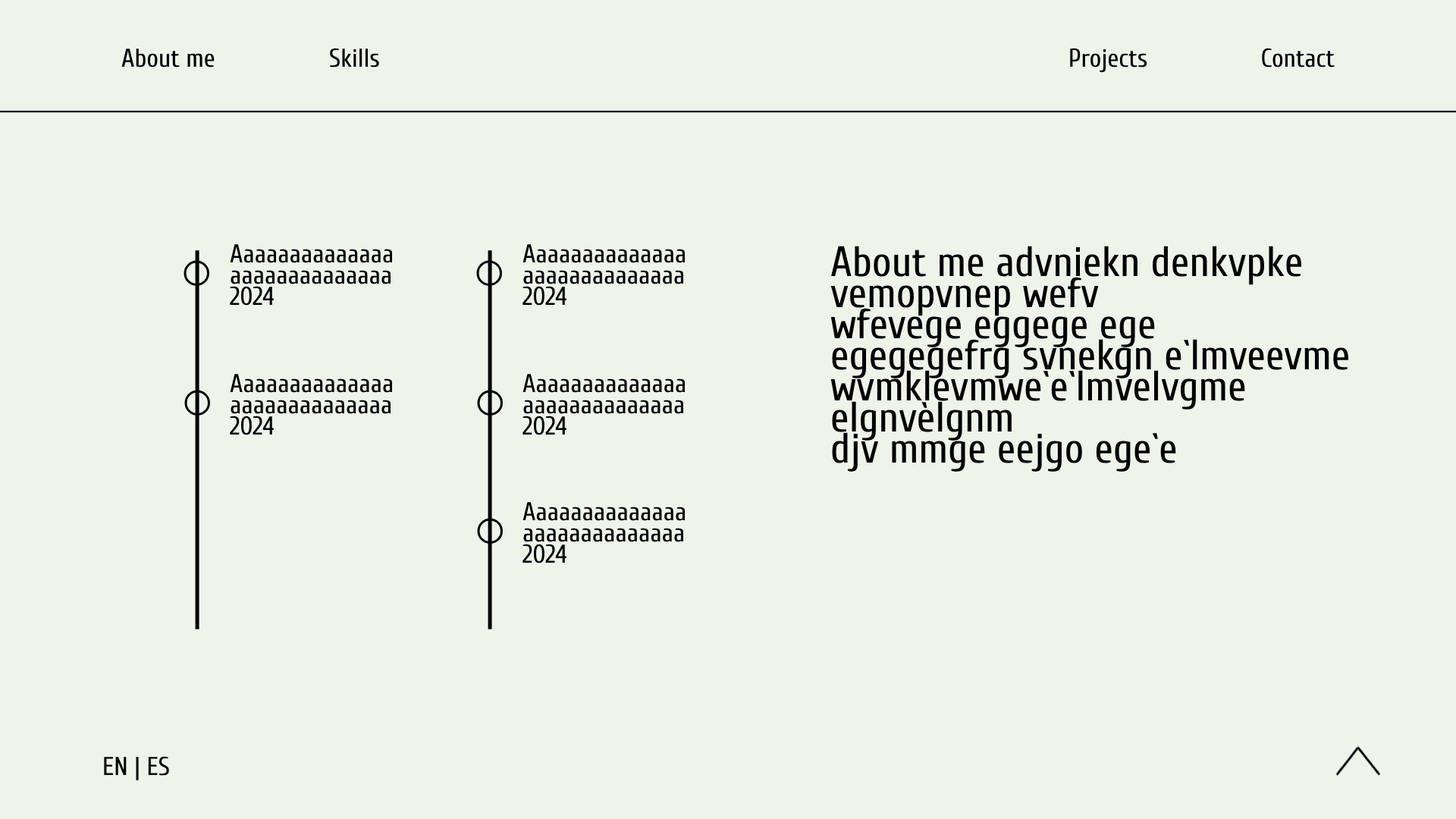
<style>
.page{position:relative;width:1456px;height:819px;background:#eff3ea}
.page>*{position:absolute;margin:0}
.t1{font:25.8px "Cuprum-Regular";color:#000000}
.t2{font:25.8px/21.2px "Cuprum-Regular";color:#000000}
.t3{font:42.5px/31.1px "Cuprum-Regular";color:#000000}
</style>
<div class="page">
<p class="t1" style="left:121px;top:49px;width:94px;height:18px">About me</p>
<p class="t1" style="left:330px;top:48px;width:49px;height:19px">Skills</p>
<p class="t1" style="left:1070px;top:48px;width:77px;height:25px">Projects</p>
<p class="t1" style="left:1262px;top:48px;width:73px;height:19px">Contact</p>
<p class="t2" style="left:230px;top:244px;width:163px;height:62px">Aaaaaaaaaaaaaa<br>aaaaaaaaaaaaaa<br>2024</p>
<p class="t2" style="left:522px;top:244px;width:164px;height:62px">Aaaaaaaaaaaaaa<br>aaaaaaaaaaaaaa<br>2024</p>
<p class="t3" style="left:830px;top:246px;width:518px;height:226px">About me advniekn denkvpke<br>vemopvnep wefv<br>wfevege eggege ege<br>egegegefrg svnekgn e`lmveevme<br>wvmklevmwe`e`lmvelvgme <br>elgnvèlgnm<br>djv mmge eejgo ege`e</p>
<p class="t2" style="left:230px;top:374px;width:163px;height:61px">Aaaaaaaaaaaaaa<br>aaaaaaaaaaaaaa<br>2024</p>
<p class="t2" style="left:522px;top:374px;width:164px;height:61px">Aaaaaaaaaaaaaa<br>aaaaaaaaaaaaaa<br>2024</p>
<p class="t2" style="left:522px;top:502px;width:164px;height:61px">Aaaaaaaaaaaaaa<br>aaaaaaaaaaaaaa<br>2024</p>
<p class="t1" style="left:104px;top:756px;width:65px;height:24px">EN | ES</p>
</div>
